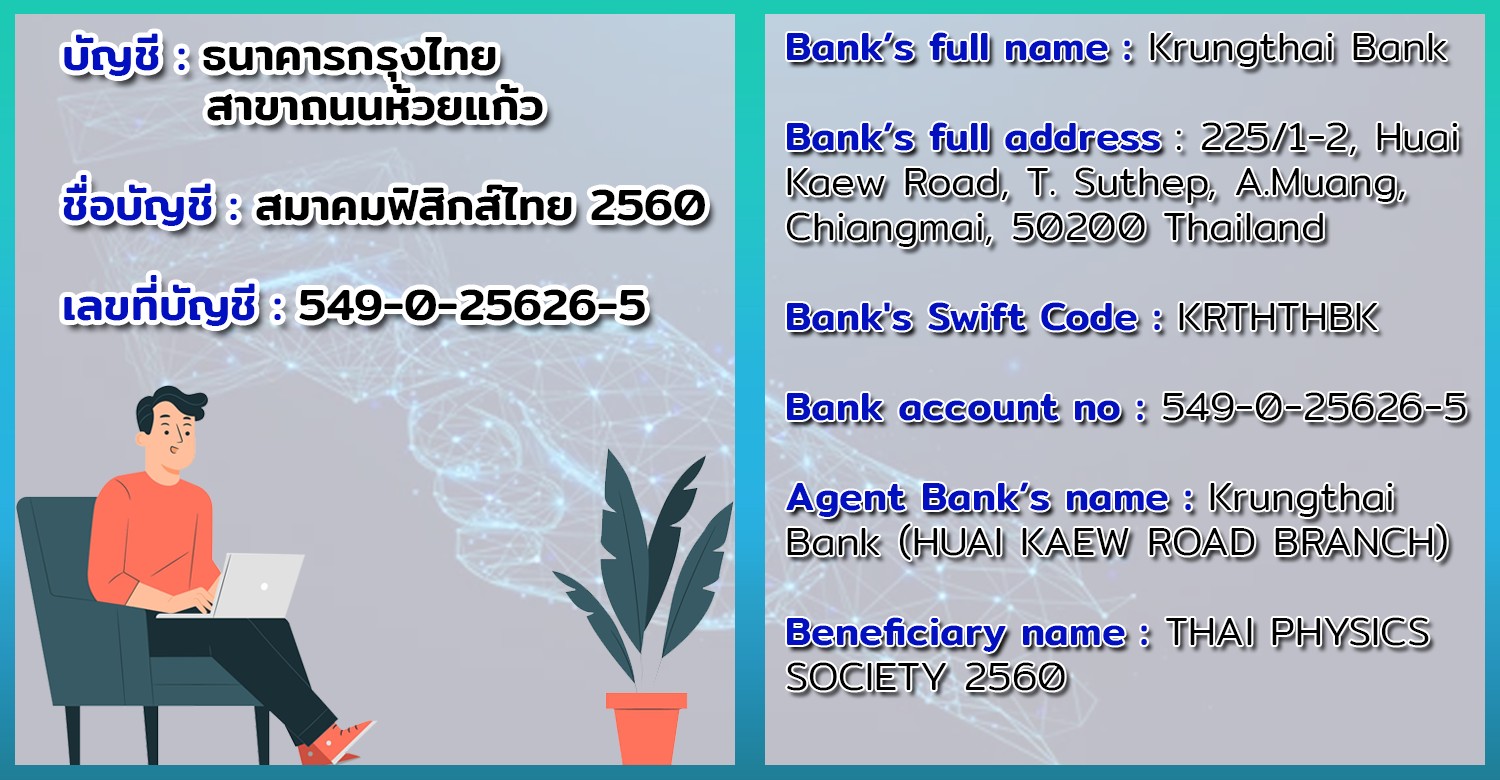
<style>
.page{position:relative;width:1500px;height:780px}
.page>*{position:absolute;margin:0}
.t1{font:45px/50px "Mitr-Medium";color:#000000}
.t2{font:45px/50px "Mitr-Medium";color:#0210c0}
.t3{font:40px/45px "Mitr-Light";color:#000000}
.t4{font:40px/45px "Mitr-Medium";color:#0210c0}
</style>
<div class="page">
<p class="t1" style="left:63px;top:33px;width:642px;height:293px"><span class="t2">บัญชี :</span> ธนาคารกรุงไทย <br>    สาขาถนนห้วยแก้ว<br><br><span class="t2">ชื่อบัญชี :</span> สมาคมฟิสิกส์ไทย 2560<br><br><span class="t2">เลขที่บัญชี :</span> 549-0-25626-5</p>
<p class="t3" style="left:786px;top:32px;width:680px;height:659px"><span class="t4">Bank’s full name :</span> Krungthai Bank<br><br><span class="t4">Bank’s full address </span>: 225/1-2, Huai <br>Kaew Road, T. Suthep, A.Muang,<br>Chiangmai, 50200 Thailand<br><br><span class="t4">Bank's Swift Code :</span> KRTHTHBK<br><span class="t4"><br>Bank account no :</span> 549-0-25626-5<br><span class="t4"><br>Agent Bank’s name :</span> Krungthai <br>Bank (HUAI KAEW ROAD BRANCH)<br><span class="t4"><br>Beneficiary name :</span> THAI PHYSICS <br>SOCIETY 2560</p>
</div>
